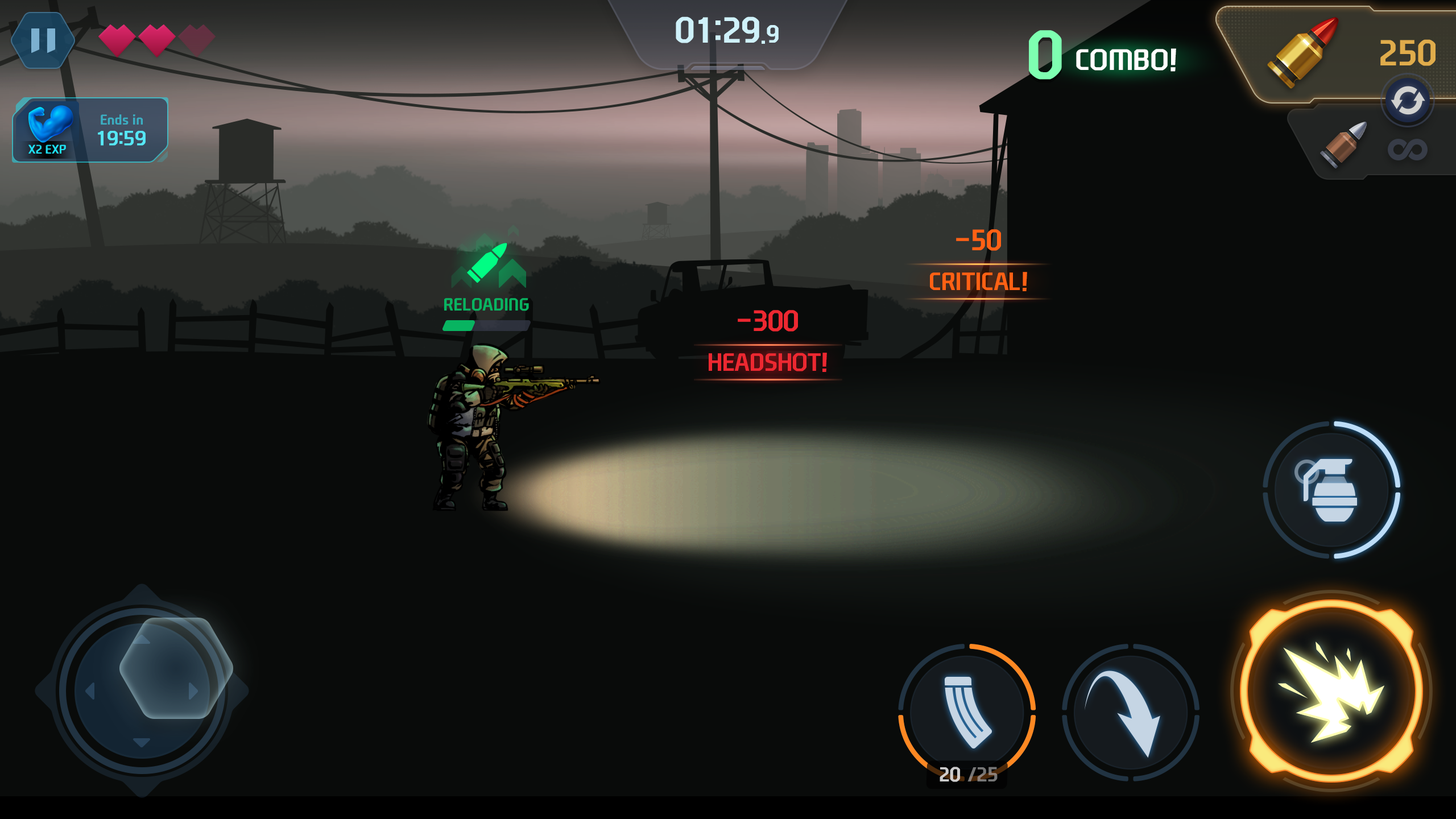
<style>
.page{position:relative;width:1456px;height:819px;background:#090b0a}
.page>*{position:absolute;margin:0}
.t1{font:34.9px "NEXONFootballGothicB";color:#cff1fa;text-transform:uppercase}
.t2{font:24px "NEXONFootballGothicB";color:#cff1fa;text-transform:uppercase}
.t3{font:65.5px "NEXONFootballGothicB";color:#7effb1;text-transform:uppercase}
.t4{font:34.9px "NEXONFootballGothicB";color:#e0ac4b;text-transform:uppercase}
.t5{font:28.4px "NEXONFootballGothicB";color:#ffffff;text-transform:uppercase}
.t6{font:13.6px "NEXONFootballGothicB";color:#3baec2}
.t7{font:19.7px "NEXONFootballGothicL";color:#56e7f5;text-transform:uppercase;font-weight:bold}
.t8{font:12px "NEXONFootballGothicB";color:#1fe2f5;text-transform:uppercase}
.t9{font:28.4px "NEXONFootballGothicB";letter-spacing:-0.01em;color:#ff6114;text-transform:uppercase}
.t10{font:24.1px "NEXONFootballGothicB";letter-spacing:-0.01em;color:#ff6114;text-transform:uppercase}
.t11{font:17.1px "NEXONFootballGothicB";color:#08b461;text-transform:uppercase}
.t12{font:28.4px "NEXONFootballGothicB";letter-spacing:-0.01em;color:#ed2831;text-transform:uppercase}
.t13{font:24.1px "NEXONFootballGothicB";letter-spacing:-0.01em;color:#ed2831;text-transform:uppercase}
.t14{font:19.6px "NEXONFootballGothicB";color:#cccccc;text-transform:uppercase}
.t15{font:19.6px "NEXONFootballGothicB";color:#767676;text-transform:uppercase}
</style>
<div class="page">
<p class="t1" style="left:676px;top:16px;width:103px;height:28px">01:29<span class="t2">.9</span></p>
<p class="t3" style="left:1029px;top:30px;width:33px;height:50px">0</p>
<p class="t4" style="left:1380px;top:39px;width:56px;height:27px">250</p>
<p class="t5" style="left:1076px;top:48px;width:100px;height:24px">combo!</p>
<p class="t6" style="left:101px;top:114px;width:42px;height:11px">Ends in</p>
<p class="t7" style="left:98px;top:131px;width:48px;height:15px">19:59</p>
<p class="t8" style="left:28px;top:144px;width:38px;height:10px">x2 exp</p>
<p class="t9" style="left:956px;top:229px;width:45px;height:22px">-50</p>
<p class="t10" style="left:930px;top:272px;width:97px;height:19px">critical!</p>
<p class="t11" style="left:444px;top:298px;width:85px;height:13px">Reloading</p>
<p class="t12" style="left:738px;top:310px;width:60px;height:22px">-300</p>
<p class="t13" style="left:709px;top:353px;width:118px;height:19px">headshot!</p>
<p class="t14" style="left:940px;top:767px;width:20px;height:15px">20</p>
<p class="t15" style="left:967px;top:767px;width:31px;height:14px">/25</p>
</div>
